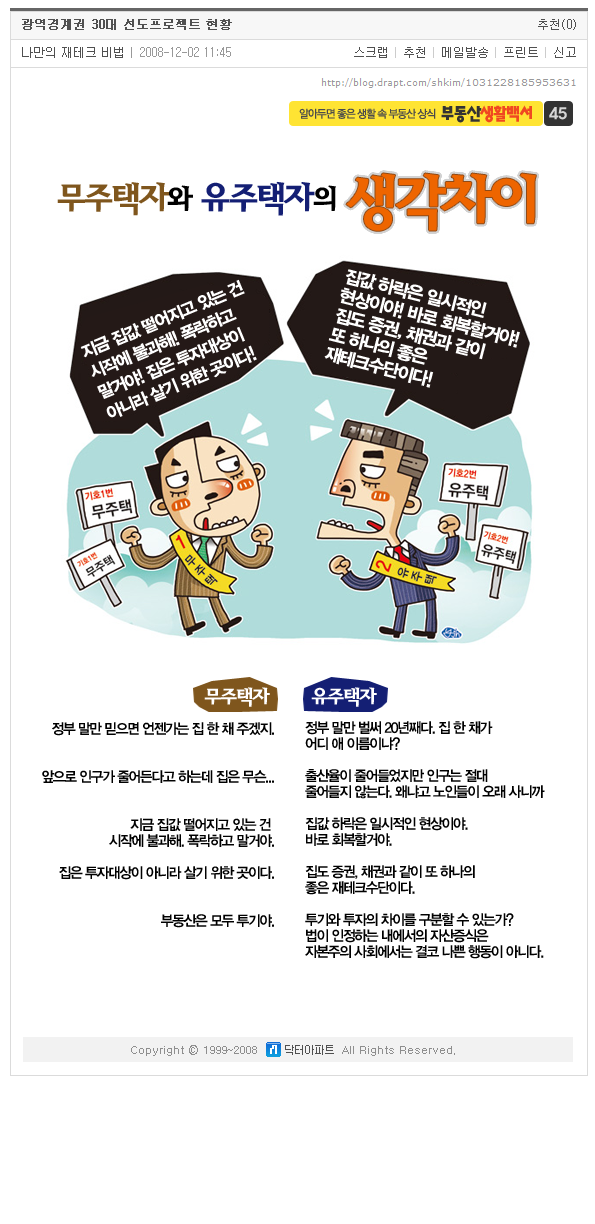
<style>
.page{position:relative;width:595px;height:1224px;background:#ffffff}
.page>*{position:absolute;margin:0}
.t1{font:16px "YDIYGO360";color:#d6d6d6}
.t2{font:58.5px "YDIBirdB";letter-spacing:-0.09em;color:#ee6500}
.t3{font:34.3px "YDIBirdB";letter-spacing:-0.09em;color:#7f561d}
.t4{font:34.6px "Âü³ª¹«b";letter-spacing:-0.09em;color:#000000}
.t5{font:30px "YDIBirdB";letter-spacing:-0.09em;color:#000000}
.t6{font:34.6px "YDIBirdB";letter-spacing:-0.09em;color:#141f74}
.t7{font:18px/20px "YDIYGO360";letter-spacing:-0.09em;color:#ffffff}
.t8{font:17px/22px "YDIYGO360";letter-spacing:-0.09em;color:#ffffff}
.t9{font:20px "YDIBirdB";letter-spacing:-0.09em;color:#ffffff}
.t10{font:34.6px "Âü³ª¹«b";letter-spacing:-0.09em;color:#ffffff}
.t11{font:14.5px/16px "YDIYGO340";letter-spacing:-0.09em;color:#000000;scale:0.95 1}
</style>
<div class="page">
<p class="t1" style="left:549px;top:107px;width:18px;height:13px">45</p>
<p class="t2" style="left:346px;top:173px;width:190px;height:58px">생각차이</p>
<p class="t3" style="left:57px;top:181px;width:279px;height:35px"><span class="t4"><br></span>무주택자<span class="t5">와 </span><span class="t6">유주택자</span><span class="t5">의</span></p>
<p class="t7" style="left:324px;top:269px;width:196px;height:119px;rotate:14deg">집값 하락은 일시적인 <br>현상이야! 바로 회복할거야!<br>집도 증권, 채권과 같이 <br>또 하나의 좋은<br>재테크수단이다!</p>
<p class="t8" style="left:80px;top:279px;width:177px;height:139px;rotate:-23deg">지금 집값 떨어지고 있는 건 <br>시작에 불과해! 폭락하고 <br>말거야! 집은 투자대상이 <br>아니라 살기 위한 곳이다!</p>
<p class="t9" style="left:204px;top:687px;width:66px;height:20px"><span class="t10"><br></span>무주택자</p>
<p class="t9" style="left:311px;top:687px;width:66px;height:20px"><span class="t10"><br></span>유주택자</p>
<p class="t11" style="left:42px;top:722px;width:232px;height:206px;text-align:right">정부 말만 믿으면 언젠가는 집 한 채 주겠지.<br><br><br>앞으로 인구가 줄어든다고 하는데 집은 무슨...<br><br><br>지금 집값 떨어지고 있는 건 <br>시작에 불과해. 폭락하고 말거야.<br><br>집은 투자대상이 아니라 살기 위한 곳이다.<br><br><br>부동산은 모두 투기야.</p>
<p class="t11" style="left:305px;top:721px;width:240px;height:238px">정부 말만 벌써 20년째다. 집 한 채가 <br>어디 애 이름이냐?<br><br>출산율이 줄어들었지만 인구는 절대 <br>줄어들지 않는다. 왜냐고 노인들이 오래 사니까<br><br>집값 하락은 일시적인 현상이야. <br>바로 회복할거야.<br><br>집도 증권, 채권과 같이 또 하나의 <br>좋은 재테크수단이다.<br><br>투기와 투자의 차이를 구분할 수 있는가? <br>법이 인정하는 내에서의 자산증식은 <br>자본주의 사회에서는 결코 나쁜 행동이 아니다.</p>
</div>
